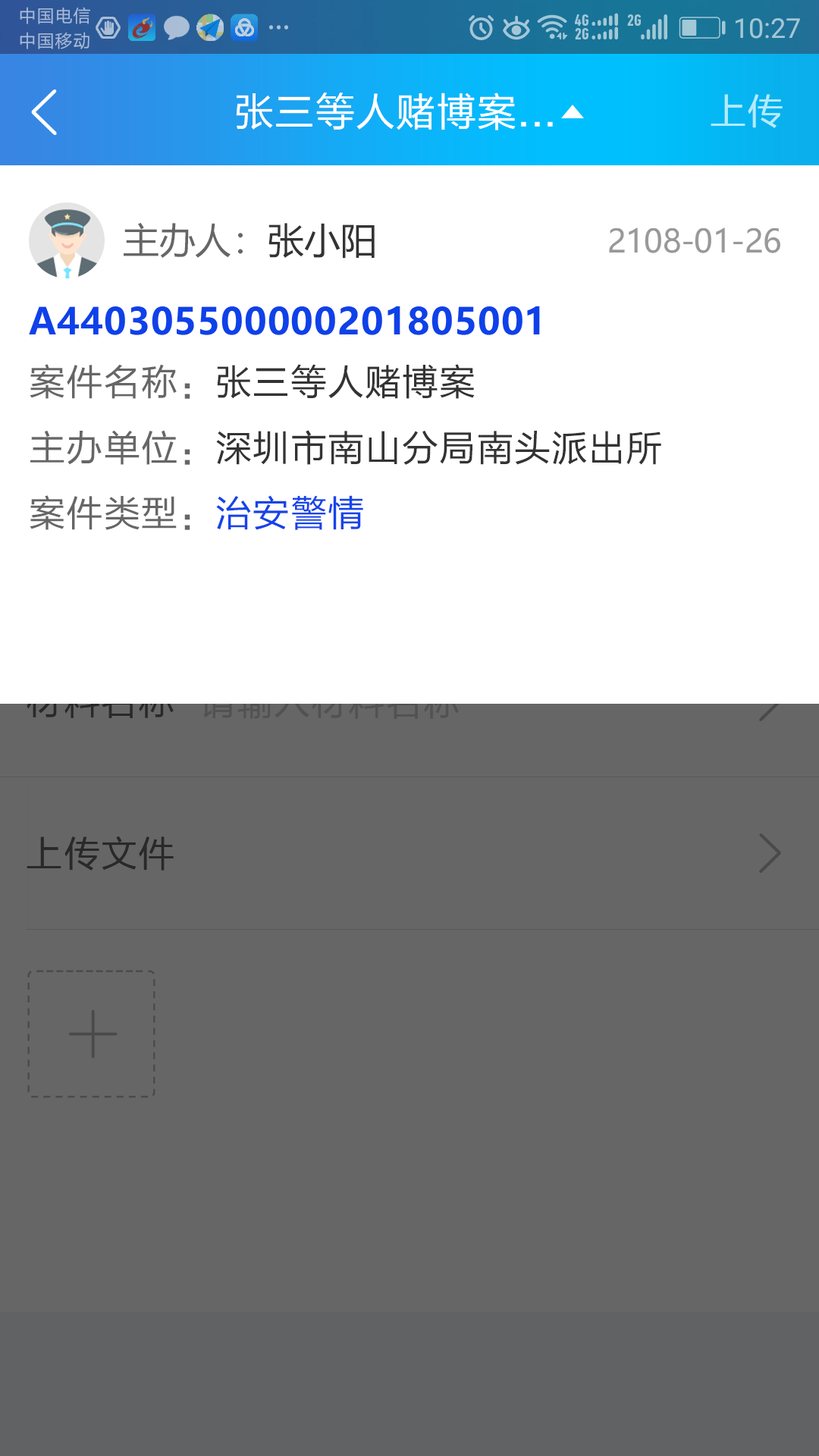
<style>
.page{position:relative;width:819px;height:1456px;background:#666666}
.page>*{position:absolute;margin:0}
.t1{font:39.4px "FZLTHK--GBK1-0";letter-spacing:0.025em;color:#ffffff}
.t2{font:36.4px "FZLTHK--GBK1-0";letter-spacing:0.025em;color:#b2ebff}
.t3{font:36.4px "MicrosoftYaHei";color:#666666}
.t4{font:36.4px "MicrosoftYaHei";color:#333333}
.t5{font:31.8px "MicrosoftYaHei";letter-spacing:-0.01em;color:#999999}
.t6{font:36.4px "MicrosoftYaHei-Bold";letter-spacing:0.025em;color:#0e41e9}
.t7{font:36.4px "FZLTHK--GBK1-0";letter-spacing:0.025em;color:#333333}
.t8{font:36.4px "FZLTHK--GBK1-0";letter-spacing:0.025em;color:#666666}
.t9{font:36.4px "FZLTHK--GBK1-0";letter-spacing:0.025em;color:#1544e9}
.t10{font:36.4px "FZLTHK--GBK1-0";letter-spacing:0.025em;color:#292929}
</style>
<div class="page">
<p class="t1" style="left:236px;top:93px;width:317px;height:37px">张三等人赌博案...</p>
<p class="t2" style="left:711px;top:94px;width:72px;height:34px">上传</p>
<p class="t3" style="left:124px;top:222px;width:251px;height:37px">主办人：<span class="t4">张小阳</span></p>
<p class="t5" style="left:609px;top:227px;width:171px;height:26px">2108-01-26</p>
<p class="t6" style="left:29px;top:306px;width:511px;height:29px">A440305500000201805001</p>
<p class="t7" style="left:30px;top:364px;width:445px;height:35px"><span class="t8">案件名称：</span>张三等人赌博案</p>
<p class="t7" style="left:30px;top:430px;width:631px;height:35px"><span class="t8">主办单位：</span>深圳市南山分局南头派出所</p>
<p class="t8" style="left:30px;top:495px;width:333px;height:35px">案件类型：<span class="t9">治安警情</span></p>
<p class="t10" style="left:27px;top:836px;width:147px;height:35px">上传文件</p>
</div>
